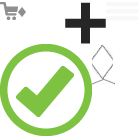
<style>
.page{position:relative;width:139px;height:136px;background:#ffffff}
.page>*{position:absolute;margin:0}
.t1{font:84px "OpenSans-Bold";color:#262626}
</style>
<div class="page">
<p class="t1" style="left:65px;top:2px;width:41px;height:42px">+</p>
</div>
